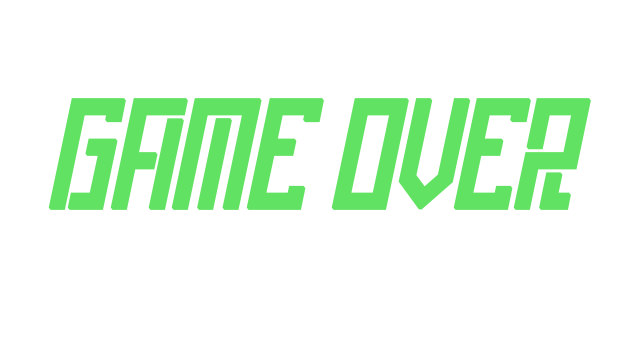
<style>
.page{position:relative;width:640px;height:360px;background:#ffffff}
.page>*{position:absolute;margin:0}
.t1{font:138px "OperationalAmplifier-Regular";color:#62e262;font-weight:bold}
</style>
<div class="page">
<p class="t1" style="left:48px;top:98px;width:543px;height:112px">GAME OVER</p>
</div>
